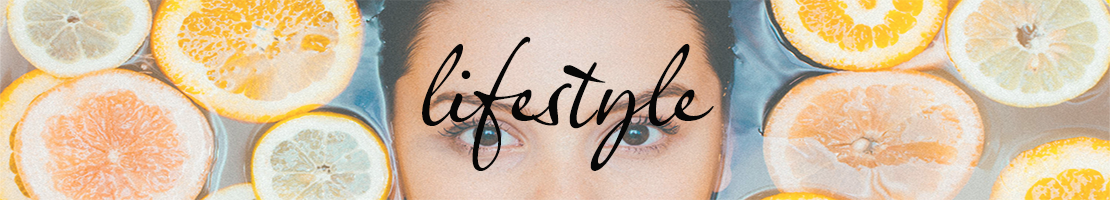
<style>
.page{position:relative;width:1110px;height:200px}
.page>*{position:absolute;margin:0}
.t1{font:120px "Olicana-Smooth";color:#060606}
</style>
<div class="page">
<p class="t1" style="left:422px;top:36px;width:292px;height:135px">lifestyle</p>
</div>
